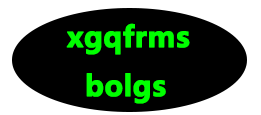
<style>
.page{position:relative;width:261px;height:115px;background:#000000}
.page>*{position:absolute;margin:0}
.t1{font:28px "MicrosoftYaHei-Bold";color:#00ff00;font-weight:bold}
</style>
<div class="page">
<p class="t1" style="left:66px;top:23px;width:124px;height:81px;text-align:justify">xgqfrms<br>  bolgs</p>
</div>
